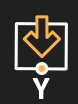
<style>
.page{position:relative;width:78px;height:104px;background:#202020}
.page>*{position:absolute;margin:0}
.t1{font:33.3px "Calibri-Bold";color:#ffffff}
</style>
<div class="page">
<p class="t1" style="left:32px;top:78px;width:18px;height:21px">Y</p>
</div>
